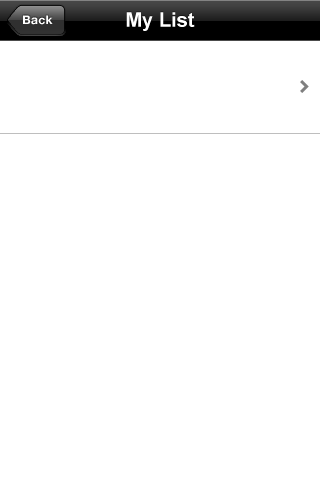
<style>
.page{position:relative;width:320px;height:500px;background:#ffffff}
.page>*{position:absolute;margin:0}
.t1{font:12px "HelveticaNeue-Bold";letter-spacing:0.025em;color:#ffffff}
.t2{font:20px "Arial-BoldMT";color:#ffffff}
</style>
<div class="page">
<p class="t1" style="left:23px;top:15px;width:30px;height:10px">Back</p>
<p class="t2" style="left:126px;top:12px;width:69px;height:19px">My List</p>
</div>
